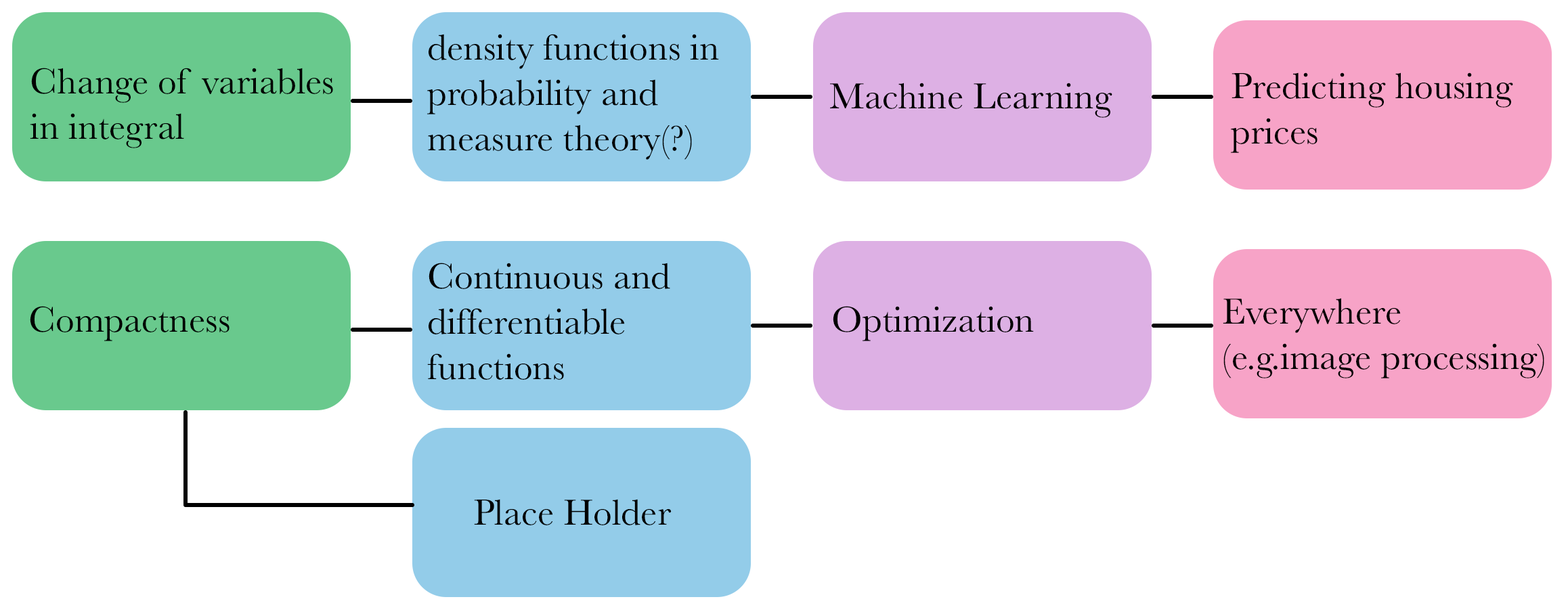
<style>
.page{position:relative;width:1568px;height:614px;background:#ffffff}
.page>*{position:absolute;margin:0}
.t1{font:37.6px "Baskerville";color:#000000}
</style>
<div class="page">
<p class="t1" style="left:427px;top:34px;width:292px;height:126px">density functions in <br>probability and <br>measure theory(?)</p>
<p class="t1" style="left:30px;top:68px;width:303px;height:80px">Change of variables<br>in integral</p>
<p class="t1" style="left:1231px;top:72px;width:282px;height:81px">Predicting housing <br>prices</p>
<p class="t1" style="left:830px;top:83px;width:282px;height:35px">Machine Learning</p>
<p class="t1" style="left:427px;top:263px;width:243px;height:117px">Continuous and <br>differentiable <br>functions</p>
<p class="t1" style="left:1223px;top:298px;width:321px;height:80px">Everywhere <br>(e.g.image processing)</p>
<p class="t1" style="left:30px;top:306px;width:200px;height:35px">Compactness</p>
<p class="t1" style="left:833px;top:306px;width:201px;height:35px">Optimization</p>
<p class="t1" style="left:474px;top:499px;width:198px;height:26px">Place Holder</p>
</div>
